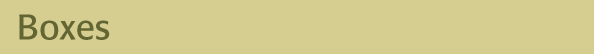
<style>
.page{position:relative;width:594px;height:54px;background:#d6cd90}
.page>*{position:absolute;margin:0}
.t1{font:35.4px "Formata-Regular";color:#636633}
</style>
<div class="page">
<p class="t1" style="left:19px;top:14px;width:91px;height:26px">Boxes</p>
</div>
